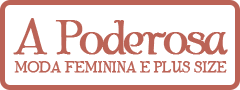
<style>
.page{position:relative;width:240px;height:90px;background:#ffffff}
.page>*{position:absolute;margin:0}
.t1{font:48px "AlbemarleDemo";letter-spacing:-0.05em;color:#bb6356;font-weight:bold}
.t2{font:15px "AlbemarleDemo";letter-spacing:-0.05em;color:#bb6356;font-weight:bold}
</style>
<div class="page">
<p class="t1" style="left:13px;top:18px;width:215px;height:37px">A Poderosa</p>
<p class="t2" style="left:14px;top:61px;width:213px;height:12px">MODA FEMININA E PLUS SIZE</p>
</div>
